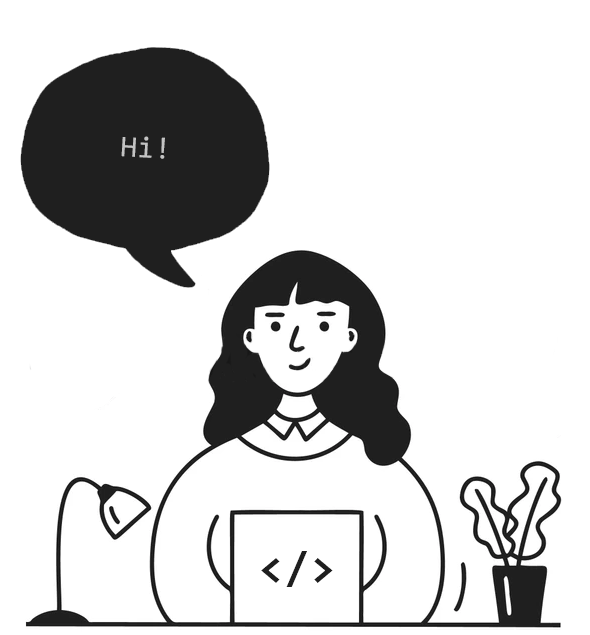
<style>
.page{position:relative;width:590px;height:635px;background:#ffffff}
.page>*{position:absolute;margin:0}
.t1{font:30px "Consolas";letter-spacing:0.02em;color:#c3c3c3}
.t2{font:45px "Consolas-Bold";letter-spacing:0.02em;color:#1f1f1f}
</style>
<div class="page">
<p class="t1" style="left:121px;top:136px;width:44px;height:23px;rotate:3deg">Hi!</p>
<p class="t2" style="left:261px;top:551px;width:72px;height:36px">&lt;/&gt;</p>
</div>
